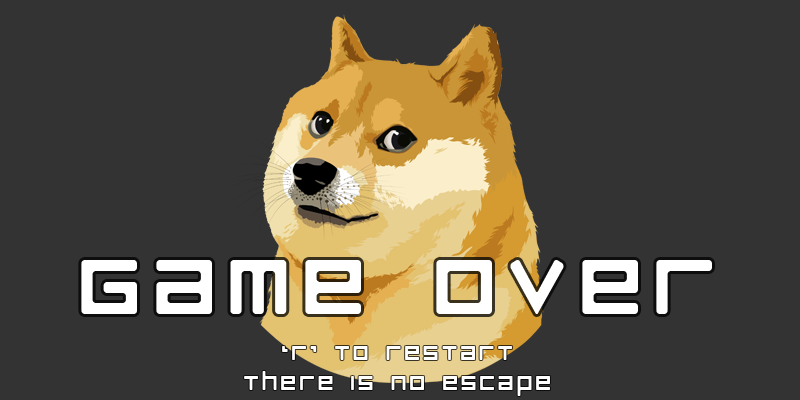
<style>
.page{position:relative;width:800px;height:400px;background:#333333}
.page>*{position:absolute;margin:0}
.t1{font:100px "RazerRegular";letter-spacing:0.1em;color:#ffffff;text-transform:uppercase}
.t2{font:25px "RazerRegular";letter-spacing:0.1em;color:#ffffff;text-transform:uppercase}
</style>
<div class="page">
<p class="t1" style="left:81px;top:260px;width:631px;height:54px">Game Over</p>
<p class="t2" style="left:244px;top:346px;width:306px;height:50px;text-align:center">‘r’ to restart<br>there is no escape</p>
</div>
